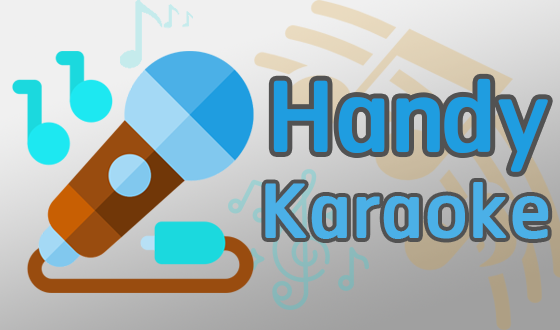
<style>
.page{position:relative;width:560px;height:330px}
.page>*{position:absolute;margin:0}
.t1{font:130px "RSU-Bold";color:#1f9de0}
.t2{font:100px "RSU-Bold";color:#4bb0e7}
</style>
<div class="page">
<p class="t1" style="left:273px;top:78px;width:275px;height:94px">Handy</p>
<p class="t2" style="left:265px;top:182px;width:284px;height:57px">Karaoke</p>
</div>
